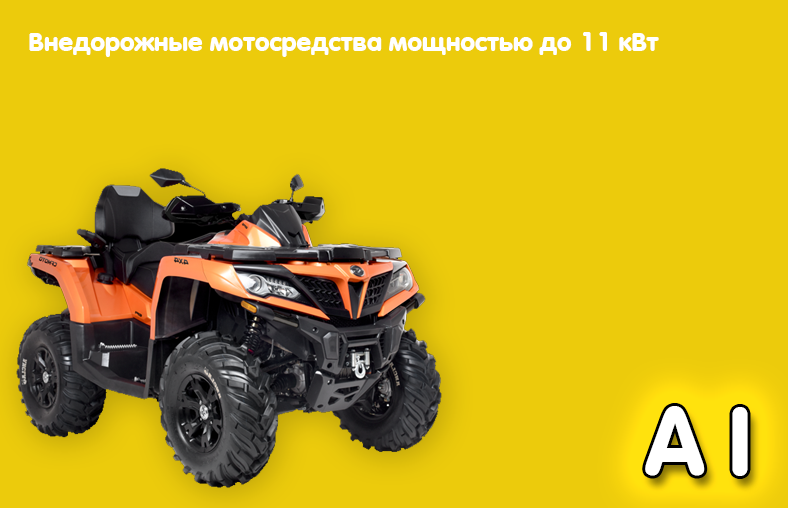
<style>
.page{position:relative;width:788px;height:508px;background:#eccb0c}
.page>*{position:absolute;margin:0}
.t1{font:26px "VAGWorld-Bold";color:#ffffff}
.t2{font:93.5px "VAGWorld-Bold";color:#ffffff}
</style>
<div class="page">
<p class="t1" style="left:29px;top:32px;width:630px;height:25px">Внедорожные мотосредства мощностью до 11 кВт</p>
<p class="t2" style="left:645px;top:406px;width:103px;height:70px">A I</p>
</div>
